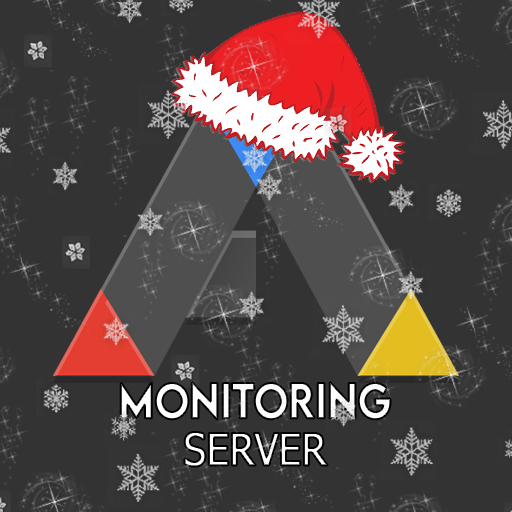
<style>
.page{position:relative;width:512px;height:512px;background:#333333}
.page>*{position:absolute;margin:0}
.t1{font:44px "LEMONMILK-Medium";letter-spacing:-0.02em;color:#ffffff;font-weight:bold;scale:0.91 1}
.t2{font:44px "Tahoma";letter-spacing:-0.02em;font-weight:bold;scale:0.91 1}
</style>
<div class="page">
<p class="t1" style="left:120px;top:382px;width:271px;height:38px">Monitoring</p>
<p class="t2" style="left:184px;top:432px;width:144px;height:35px">SERVER</p>
</div>
